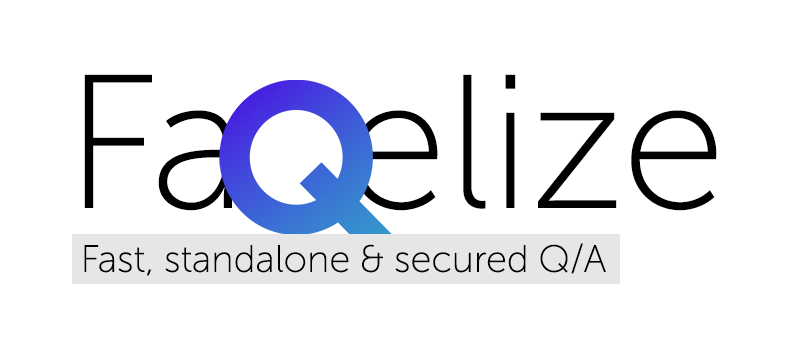
<style>
.page{position:relative;width:800px;height:350px;background:#ffffff}
.page>*{position:absolute;margin:0}
.t1{font:190px "MuseoSansCyrl-100";color:#000000}
.t2{font:38px "MuseoSansCyrl-100";color:#000000}
</style>
<div class="page">
<p class="t1" style="left:84px;top:74px;width:633px;height:137px">Fa  elize</p>
<p class="t2" style="left:84px;top:243px;width:522px;height:33px">Fast, standalone &amp; secured Q/A</p>
</div>
